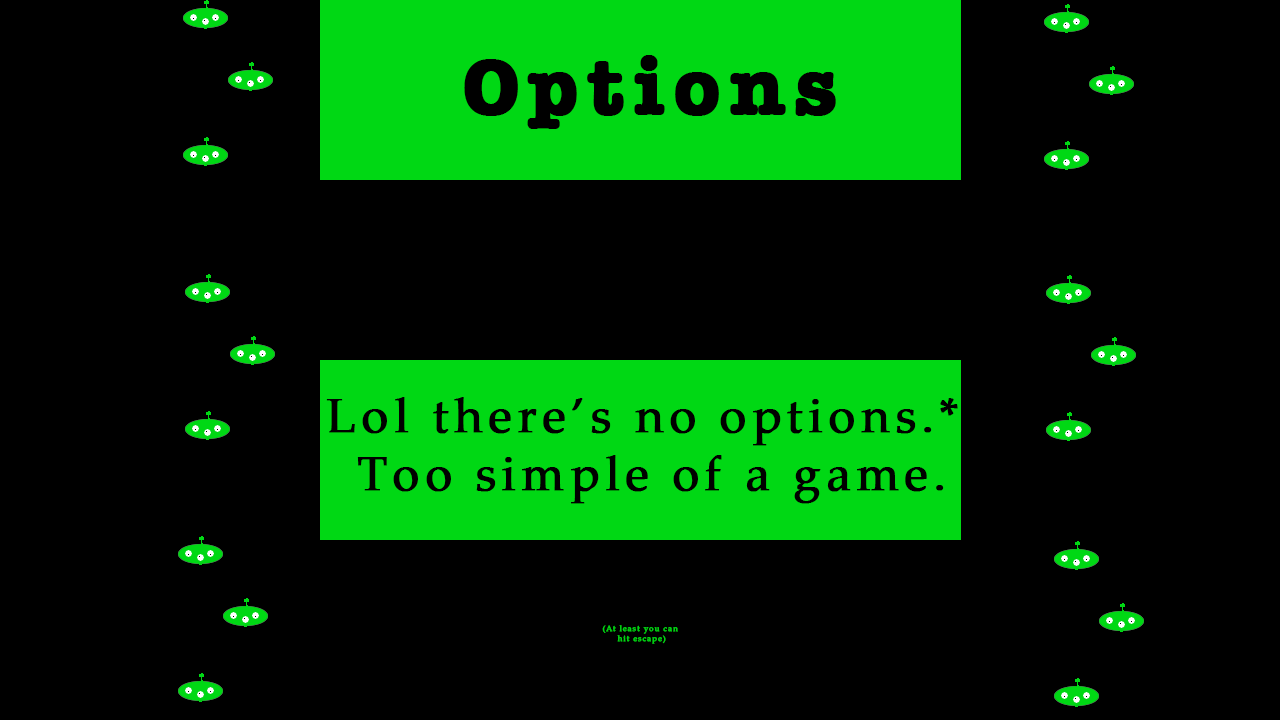
<style>
.page{position:relative;width:1280px;height:720px;background:#000000}
.page>*{position:absolute;margin:0}
.t1{font:81px "AmericanTypewriter-Bold";letter-spacing:0.1em;color:#000000;font-weight:bold}
.t2{font:48px "PalatinoLinotype-Roman";letter-spacing:0.1em;color:#000000;font-weight:bold}
.t3{font:8px "PalatinoLinotype-Roman";letter-spacing:0.1em;color:#00d814;font-weight:bold}
</style>
<div class="page">
<p class="t1" style="left:464px;top:55px;width:372px;height:74px">Options</p>
<p class="t2" style="left:326px;top:397px;width:632px;height:107px;text-align:center">Lol there’s no options.* <br>Too simple of a game.</p>
<p class="t3" style="left:602px;top:625px;width:76px;height:19px;text-align:center">(At least you can <br>hit escape)</p>
</div>
